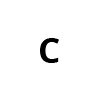
<style>
.page{position:relative;width:100px;height:100px;background:#ffffff}
.page>*{position:absolute;margin:0}
.t1{font:35px "OpenSans-Bold";color:#000000}
</style>
<div class="page">
<p class="t1" style="left:40px;top:38px;width:19px;height:25px">C</p>
</div>
